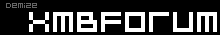
<style>
.page{position:relative;width:220px;height:35px;background:#000000}
.page>*{position:absolute;margin:0}
.t1{font:8px "BitDustTwo";color:#656565}
.t2{font:32px "BitDustTwo";color:#ffffff}
</style>
<div class="page">
<p class="t1" style="left:6px;top:3px;width:31px;height:5px">demize</p>
<p class="t2" style="left:29px;top:12px;width:188px;height:20px">XMBForum</p>
</div>
